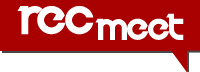
<style>
.page{position:relative;width:200px;height:72px;background:#a90101}
.page>*{position:absolute;margin:0}
.t1{font:40px "Velocity";color:#ffffff}
.t2{font:30px "Velocity";color:#ffffff}
</style>
<div class="page">
<p class="t1" style="left:17px;top:6px;width:77px;height:29px">rec</p>
<p class="t2" style="left:95px;top:13px;width:89px;height:27px">meet</p>
</div>
